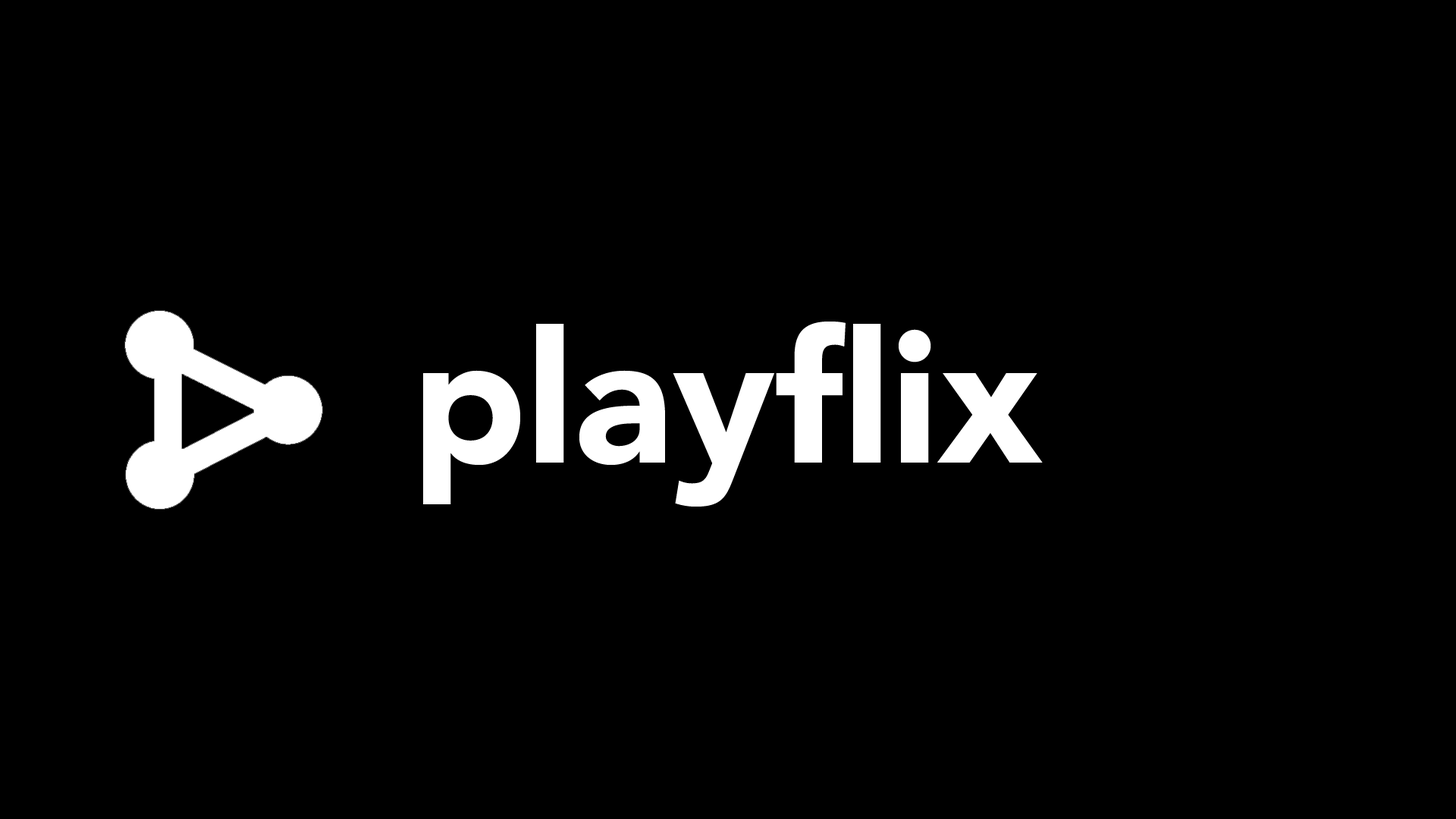
<style>
.page{position:relative;width:1456px;height:819px;background:#000000}
.page>*{position:absolute;margin:0}
.t1{font:183.6px "AvenirLTStd-Black";color:#ffffff}
</style>
<div class="page">
<p class="t1" style="left:423px;top:322px;width:620px;height:185px">playflix</p>
</div>
